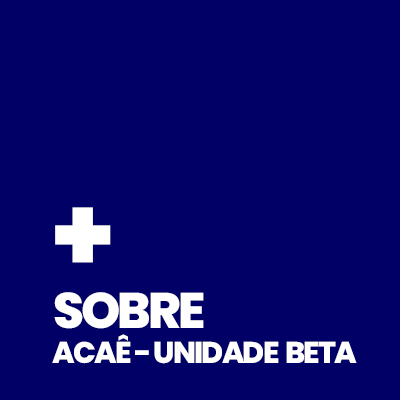
<style>
.page{position:relative;width:400px;height:400px;background:#000066}
.page>*{position:absolute;margin:0}
.t1{font:107.6px "Poppins-ExtraBold";letter-spacing:-0.06em;color:#ffffff;text-transform:uppercase}
.t2{font:30px/34.4px "Poppins-ExtraBold";letter-spacing:-0.06em;color:#ffffff;text-transform:uppercase}
.t3{font:50px/37.4px "Poppins-ExtraBold";letter-spacing:-0.06em;color:#ffffff;text-transform:uppercase}
</style>
<div class="page">
<p class="t1" style="left:55px;top:207px;width:56px;height:56px">+</p>
<p class="t2" style="left:52px;top:292px;width:305px;height:72px"><span class="t3"><br><br>sobre<br></span>acaê - unidade  beta</p>
</div>
